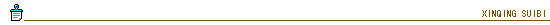
<style>
.page{position:relative;width:550px;height:25px;background:#ffffff}
.page>*{position:absolute;margin:0}
.t1{font:10px "SimHei";color:#725602}
</style>
<div class="page">
<p class="t1" style="left:482px;top:10px;width:63px;height:7px">XINQING SUIBI</p>
</div>
